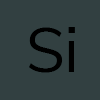
<style>
.page{position:relative;width:100px;height:100px;background:#324041}
.page>*{position:absolute;margin:0}
.t1{font:62.5px "Muli-Regular";color:#000000}
</style>
<div class="page">
<p class="t1" style="left:29px;top:27px;width:46px;height:46px">Si</p>
</div>
